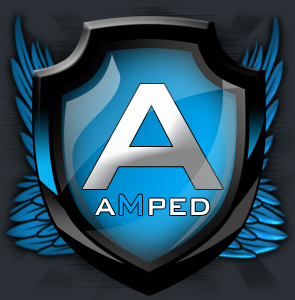
<style>
.page{position:relative;width:295px;height:300px}
.page>*{position:absolute;margin:0}
.t1{font:203.5px "BankGothicBT-Medium"}
.t2{font:39.1px "BankGothicBT-Medium";color:#fefdfd;scale:0.86 1}
.t3{font:39.1px "BankGothicBT-Medium";color:#03a4f8;scale:0.86 1}
</style>
<div class="page">
<p class="t1" style="left:82px;top:84px;width:141px;height:105px">A</p>
<p class="t2" style="left:95px;top:194px;width:115px;height:21px">a<span class="t3">M</span>ped</p>
</div>
